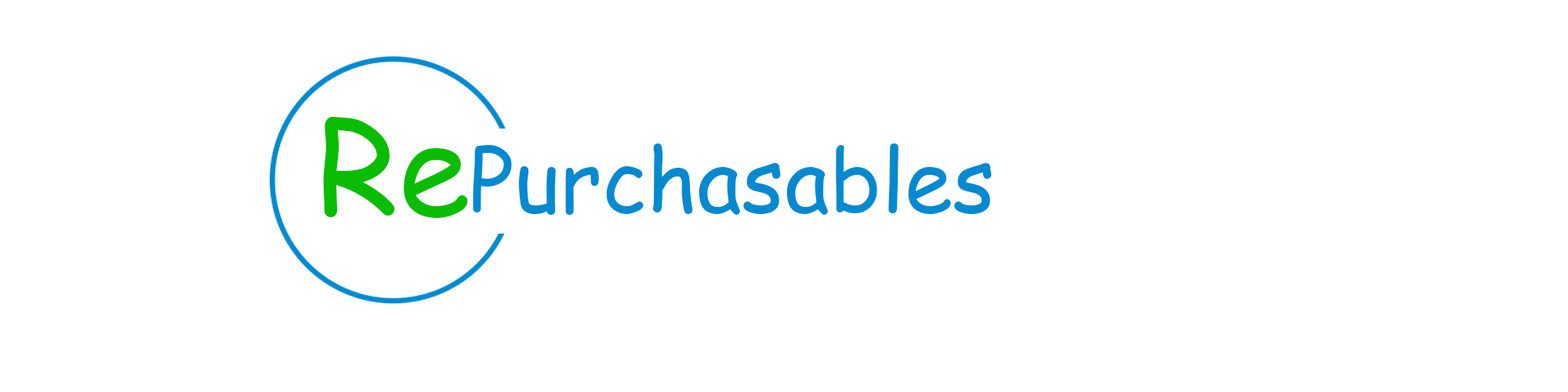
<style>
.page{position:relative;width:1568px;height:392px;background:#ffffff}
.page>*{position:absolute;margin:0}
.t1{font:130.9px "ComicSansMS";color:#09bd00}
.t2{font:87.3px "ComicSansMS";color:#018ad1}
</style>
<div class="page">
<p class="t1" style="left:323px;top:116px;width:145px;height:102px">Re</p>
<p class="t2" style="left:473px;top:143px;width:519px;height:72px">Purchasables</p>
</div>
